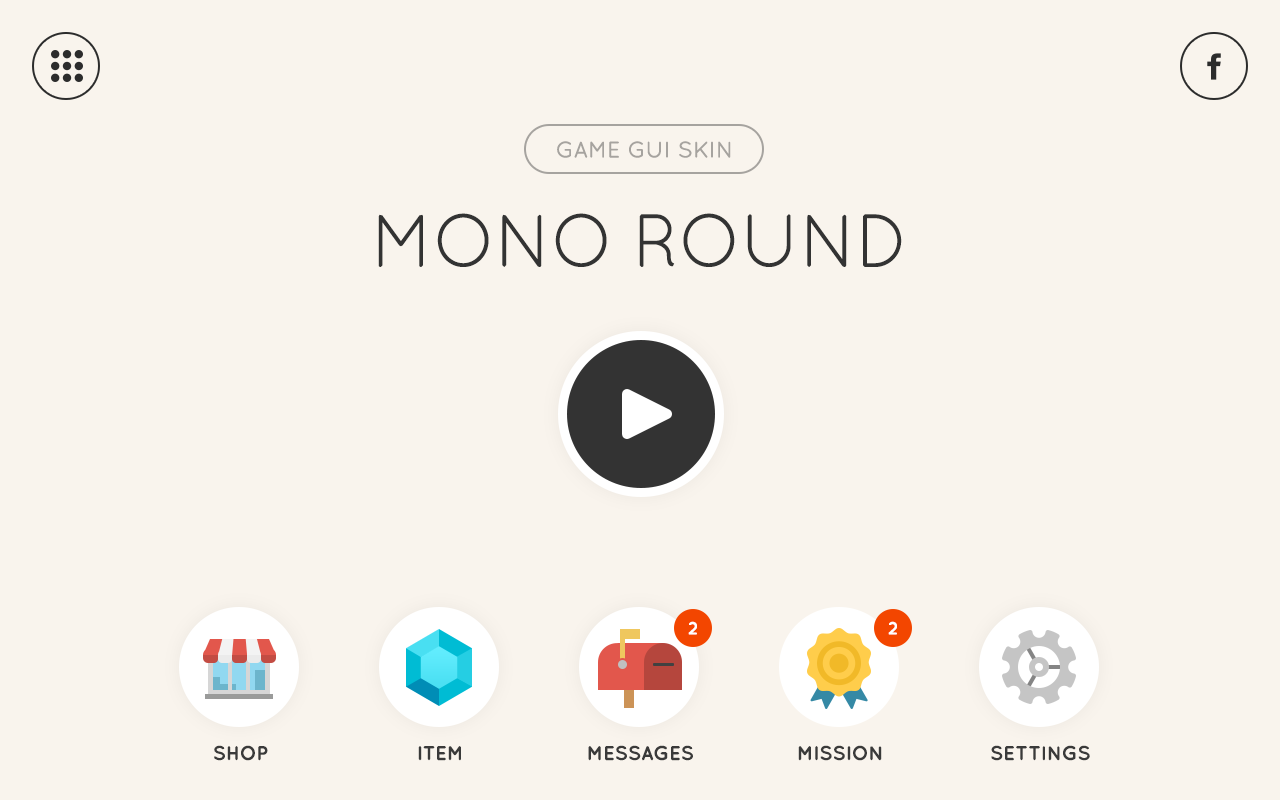
<style>
.page{position:relative;width:1280px;height:800px;background:#f9f4ed}
.page>*{position:absolute;margin:0}
.t1{font:22px "QuicksandBook-Regular";letter-spacing:-0.01em;color:#a6a39f;text-transform:uppercase;font-weight:bold}
.t2{font:75px "QuicksandBook-Regular";letter-spacing:-0.025em;color:#333333;text-transform:uppercase}
.t3{font:18px "QuicksandBold-Regular";letter-spacing:0.04em;color:#ffffff}
.t4{font:20px "QuicksandBold-Regular";letter-spacing:-0.025em;color:#3a3a3a;text-transform:uppercase}
</style>
<div class="page">
<p class="t1" style="left:557px;top:141px;width:174px;height:17px">Game Gui Skin</p>
<p class="t2" style="left:378px;top:213px;width:524px;height:54px">Mono Round</p>
<p class="t3" style="left:688px;top:621px;width:9px;height:14px">2</p>
<p class="t3" style="left:888px;top:621px;width:9px;height:14px">2</p>
<p class="t4" style="left:214px;top:745px;width:54px;height:16px">shop</p>
<p class="t4" style="left:418px;top:746px;width:43px;height:15px">Item</p>
<p class="t4" style="left:588px;top:745px;width:105px;height:16px">Messages</p>
<p class="t4" style="left:798px;top:745px;width:84px;height:16px">Mission</p>
<p class="t4" style="left:991px;top:745px;width:99px;height:16px">Settings</p>
</div>
